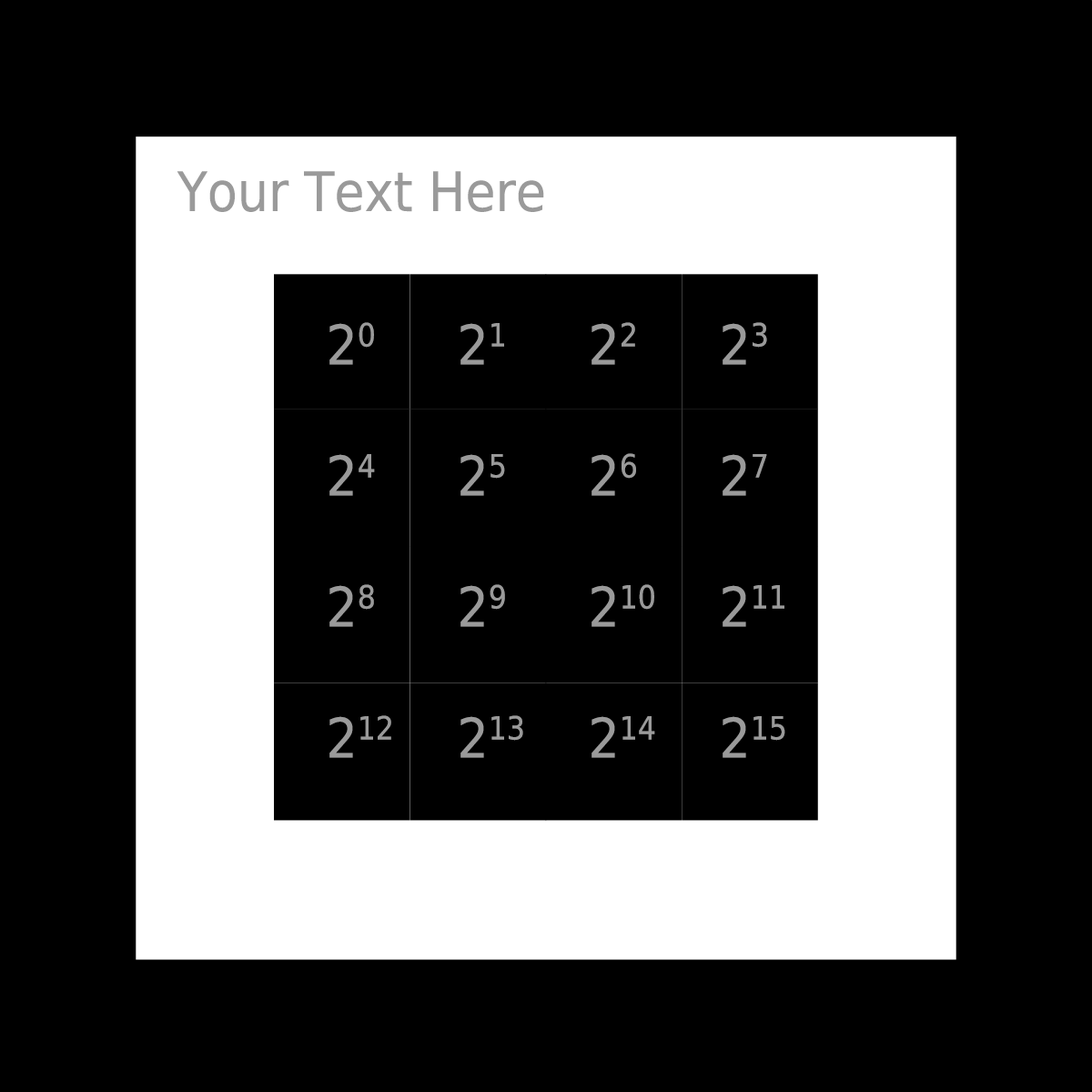
<style>
.page{position:relative;width:1092px;height:1092px;background:#000000}
.page>*{position:absolute;margin:0}
.t1{font:54.6px "DejaVuSansCondensed";color:#9a9a9a}
</style>
<div class="page">
<p class="t1" style="left:177px;top:171px;width:367px;height:41px">Your Text Here</p>
<p class="t1" style="left:329px;top:322px;width:456px;height:436px">20   21   22   23<br><br>24   25   26   27<br><br>28   29   210  211<br><br>212  213  214  215</p>
</div>
